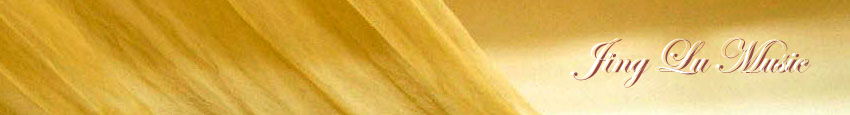
<style>
.page{position:relative;width:850px;height:115px}
.page>*{position:absolute;margin:0}
.t1{font:48px "EdwardianScriptITC";color:#ffffff}
.t2{font:48px "EdwardianScriptITC";color:#954646}
</style>
<div class="page">
<p class="t1" style="left:569px;top:37px;width:238px;height:50px">Jing Lu Music</p>
<p class="t2" style="left:573px;top:38px;width:238px;height:50px">Jing Lu Music</p>
</div>
